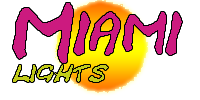
<style>
.page{position:relative;width:200px;height:100px;background:#ffffff}
.page>*{position:absolute;margin:0}
.t1{font:24px "CrackedJohnnie";color:#c2cc1a}
.t2{font:60px "CrackedJohnnie";color:#cc1a7f}
</style>
<div class="page">
<p class="t1" style="left:13px;top:3px;width:169px;height:79px"><span class="t2">Miami<br></span>lights</p>
</div>
